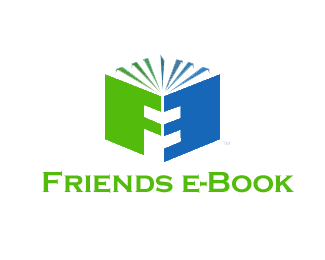
<style>
.page{position:relative;width:325px;height:260px;background:#ffffff}
.page>*{position:absolute;margin:0}
.t1{font:30px "CopperplateGothic-Bold";color:#53bb0c}
</style>
<div class="page">
<p class="t1" style="left:42px;top:171px;width:252px;height:22px">Friends e-Book</p>
</div>
